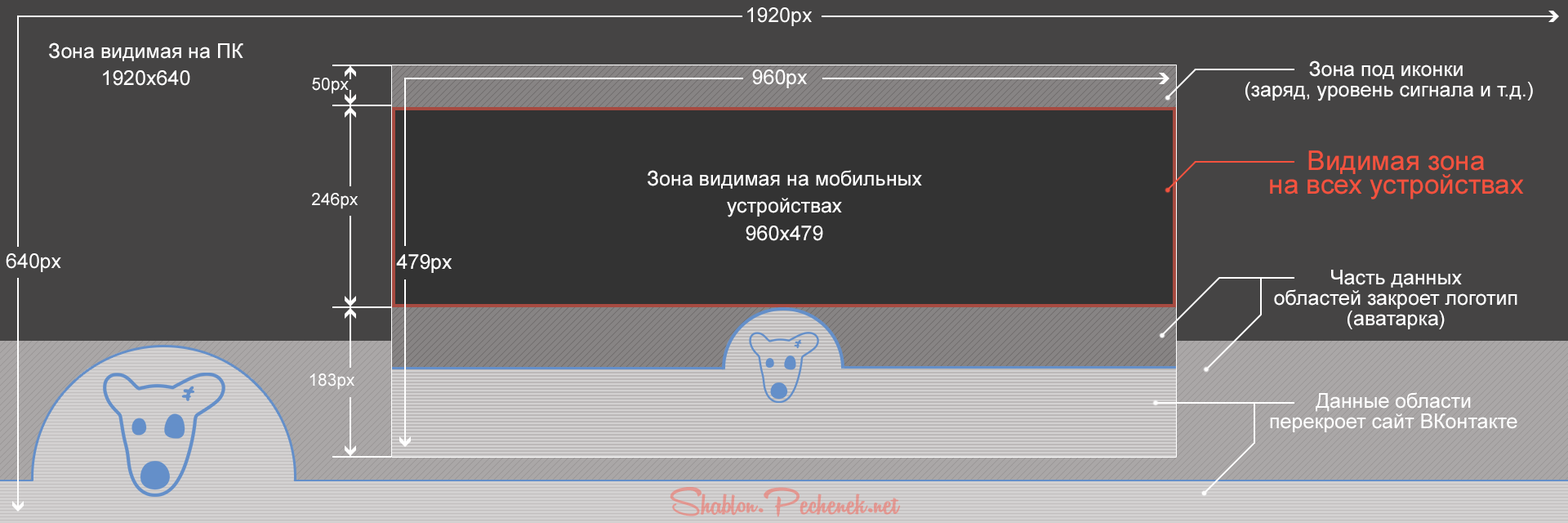
<style>
.page{position:relative;width:1568px;height:523px;background:#454444}
.page>*{position:absolute;margin:0}
.t1{font:20.4px/27.2px "ArialMT";color:#fefefe}
.t2{font:20.4px/20.4px "ArialMT";color:#ffffff}
.t3{font:17px "ArialMT";color:#ffffff}
.t4{font:20.4px "ArialMT";color:#ffffff}
.t5{font:27.2px/23.8px "ArialMT";color:#f4523e}
.t6{font:20.4px/27.2px "ArialMT";color:#ffffff}
</style>
<div class="page">
<p class="t1" style="left:49px;top:42px;width:194px;height:44px;text-align:center">Зона видимая на ПК<br>1920x640</p>
<p class="t2" style="left:1245px;top:60px;width:288px;height:41px;text-align:center">Зона под иконки<br> (заряд, уровень сигнала и т.д.)</p>
<p class="t3" style="left:312px;top:78px;width:37px;height:16px">50px</p>
<p class="t4" style="left:752px;top:69px;width:55px;height:19px">960px</p>
<p class="t5" style="left:1270px;top:150px;width:254px;height:49px;text-align:center">Видимая зона <br>на всех устройствах</p>
<p class="t6" style="left:648px;top:170px;width:274px;height:71px;text-align:center">Зона видимая на мобильных устройствах<br>960x479</p>
<p class="t3" style="left:312px;top:193px;width:46px;height:16px">246px</p>
<p class="t4" style="left:396px;top:254px;width:56px;height:19px">479px</p>
<p class="t2" style="left:1274px;top:270px;width:243px;height:59px;text-align:center">Часть данных <br>областей закроет логотип (аватарка)</p>
<p class="t3" style="left:310px;top:373px;width:44px;height:17px">183px</p>
<p class="t2" style="left:1270px;top:392px;width:247px;height:40px;text-align:center">Данные области <br>перекроет сайт ВКонтакте</p>
</div>
